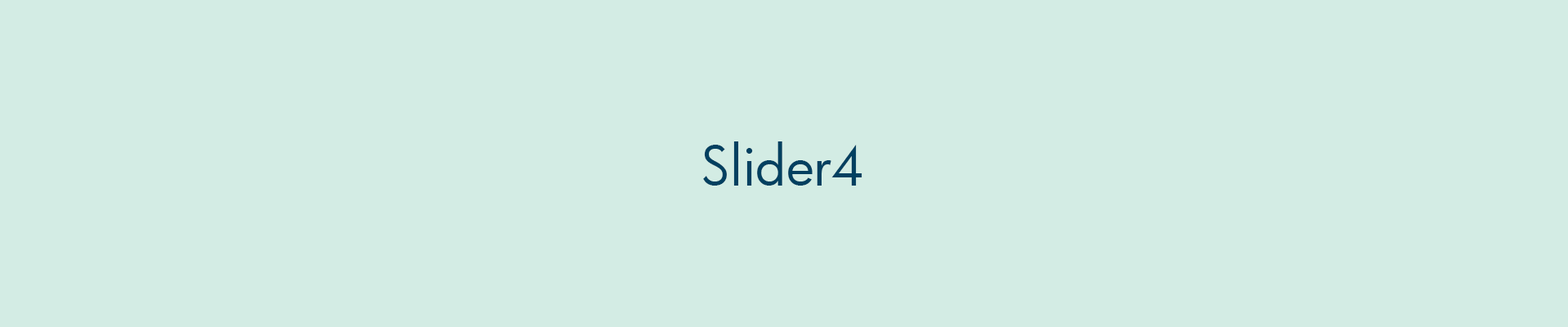
<style>
.page{position:relative;width:1568px;height:327px;background:#d3ece4}
.page>*{position:absolute;margin:0}
.t1{font:53.1px "Futura-Book";color:#014060}
</style>
<div class="page">
<p class="t1" style="left:703px;top:141px;width:159px;height:44px">Slider4</p>
</div>
